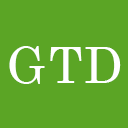
<style>
.page{position:relative;width:128px;height:128px;background:#5ba525}
.page>*{position:absolute;margin:0}
.t1{font:50px "CenturySchoolbook";letter-spacing:0.05em;color:#ffffff}
</style>
<div class="page">
<p class="t1" style="left:9px;top:46px;width:112px;height:38px">GTD</p>
</div>
